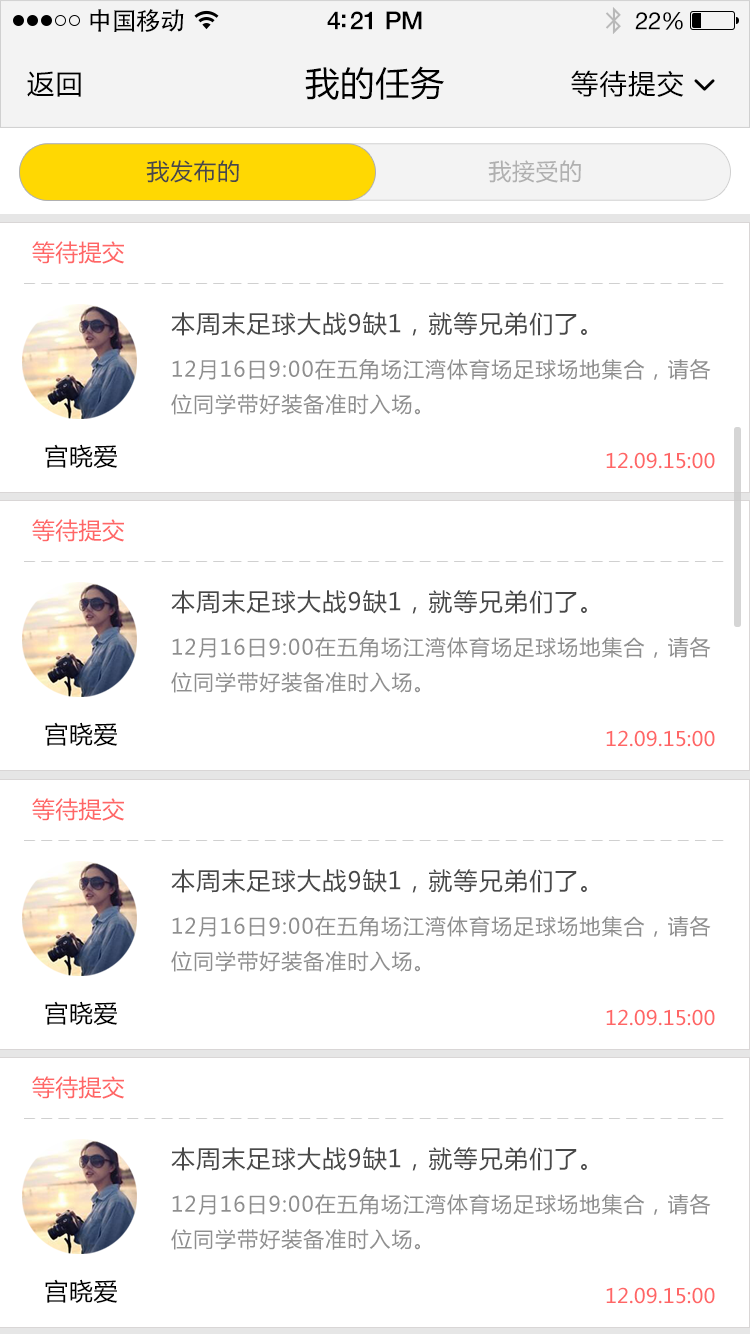
<style>
.page{position:relative;width:750px;height:1334px;background:#ffffff}
.page>*{position:absolute;margin:0}
.t1{font:25px "AdobeHeitiStd-Regular";letter-spacing:-0.025em;color:#000000}
.t2{font:25px "HelveticaNeue-Medium";letter-spacing:-0.02em;color:#000000}
.t3{font:24px "HelveticaNeue";letter-spacing:-0.02em;color:#000000}
.t4{font:27px "MicrosoftYaHei";letter-spacing:0.05em;color:#000000}
.t5{font:34px "MicrosoftYaHei";letter-spacing:0.03em;color:#000000}
.t6{font:23px "MicrosoftYaHei";letter-spacing:0.03em;color:#484848}
.t7{font:23px "MicrosoftYaHei";letter-spacing:0.03em;color:#b0b0b0}
.t8{font:23px "MicrosoftYaHei";letter-spacing:0.01em;color:#ff6666}
.t9{font:24px "MicrosoftYaHei";letter-spacing:0.05em;color:#555555}
.t10{font:21px/35px "MicrosoftYaHei";letter-spacing:0.05em;color:#8e8e8e}
.t11{font:24px "MicrosoftYaHei";letter-spacing:0.03em;color:#000000}
.t12{font:20px "MicrosoftYaHei";letter-spacing:0.01em;color:#ff6666}
</style>
<div class="page">
<p class="t1" style="left:90px;top:9px;width:94px;height:23px">中国移动</p>
<p class="t2" style="left:327px;top:11px;width:95px;height:19px">4:21 PM</p>
<p class="t3" style="left:635px;top:12px;width:48px;height:18px">22%</p>
<p class="t4" style="left:27px;top:71px;width:54px;height:26px">返回</p>
<p class="t5" style="left:305px;top:66px;width:139px;height:34px">我的任务</p>
<p class="t4" style="left:571px;top:70px;width:113px;height:27px">等待提交</p>
<p class="t6" style="left:146px;top:160px;width:93px;height:23px">我发布的</p>
<p class="t7" style="left:488px;top:160px;width:93px;height:23px">我接受的</p>
<p class="t8" style="left:32px;top:241px;width:92px;height:23px">等待提交</p>
<p class="t9" style="left:171px;top:312px;width:416px;height:24px">本周末足球大战9缺1，就等兄弟们了。</p>
<p class="t10" style="left:171px;top:359px;width:540px;height:56px">12月16日9:00在五角场江湾体育场足球场地集合，请各<br>位同学带好装备准时入场。</p>
<p class="t11" style="left:45px;top:444px;width:73px;height:24px">宫晓爱</p>
<p class="t12" style="left:606px;top:452px;width:109px;height:17px">12.09.15:00</p>
<p class="t8" style="left:32px;top:519px;width:92px;height:23px">等待提交</p>
<p class="t9" style="left:171px;top:590px;width:416px;height:24px">本周末足球大战9缺1，就等兄弟们了。</p>
<p class="t10" style="left:171px;top:637px;width:540px;height:56px">12月16日9:00在五角场江湾体育场足球场地集合，请各<br>位同学带好装备准时入场。</p>
<p class="t11" style="left:45px;top:722px;width:73px;height:24px">宫晓爱</p>
<p class="t12" style="left:606px;top:730px;width:109px;height:17px">12.09.15:00</p>
<p class="t8" style="left:32px;top:798px;width:92px;height:23px">等待提交</p>
<p class="t9" style="left:171px;top:869px;width:416px;height:24px">本周末足球大战9缺1，就等兄弟们了。</p>
<p class="t10" style="left:171px;top:916px;width:540px;height:56px">12月16日9:00在五角场江湾体育场足球场地集合，请各<br>位同学带好装备准时入场。</p>
<p class="t11" style="left:45px;top:1001px;width:73px;height:24px">宫晓爱</p>
<p class="t12" style="left:606px;top:1009px;width:109px;height:17px">12.09.15:00</p>
<p class="t8" style="left:32px;top:1076px;width:92px;height:23px">等待提交</p>
<p class="t9" style="left:171px;top:1147px;width:416px;height:24px">本周末足球大战9缺1，就等兄弟们了。</p>
<p class="t10" style="left:171px;top:1194px;width:540px;height:56px">12月16日9:00在五角场江湾体育场足球场地集合，请各<br>位同学带好装备准时入场。</p>
<p class="t11" style="left:45px;top:1279px;width:73px;height:24px">宫晓爱</p>
<p class="t12" style="left:606px;top:1287px;width:109px;height:17px">12.09.15:00</p>
</div>
